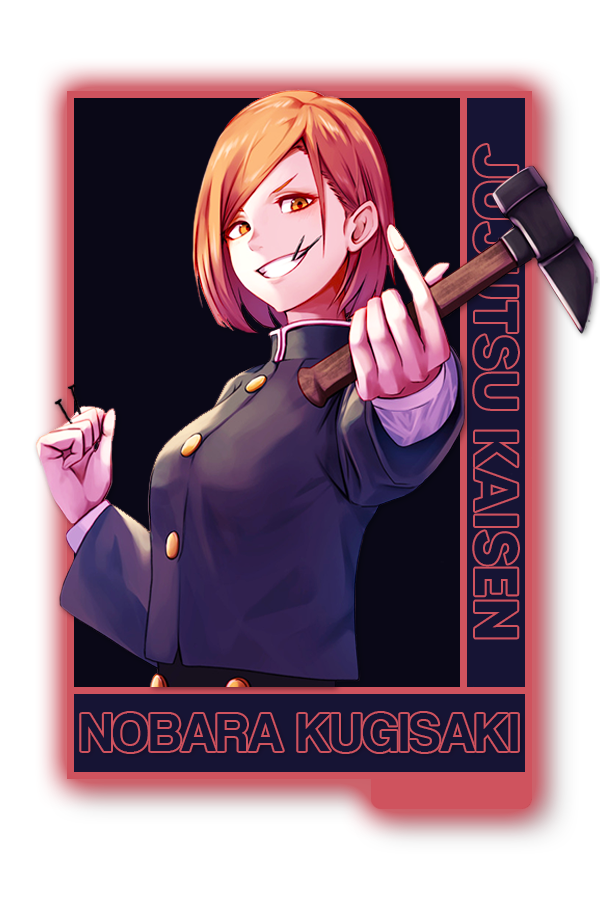
<style>
.page{position:relative;width:600px;height:900px;background:#ffffff}
.page>*{position:absolute;margin:0}
.t1{font:60.3px "MADETOMMY-Bold";color:#14182e}
.t2{font:55.1px "CoolveticaRg-Regular";color:#14182e}
</style>
<div class="page">
<p class="t1" style="left:474px;top:145px;width:44px;height:493px;rotate:90deg">JUJUTSU KAISEN</p>
<p class="t2" style="left:81px;top:713px;width:437px;height:39px">NOBARA KUGISAKI</p>
</div>
